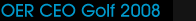
<style>
.page{position:relative;width:196px;height:21px;background:#000000}
.page>*{position:absolute;margin:0}
.t1{font:18px "AvantGardeITCbyBT-Medium";color:#0099cc}
</style>
<div class="page">
<p class="t1" style="left:1px;top:3px;width:159px;height:14px">OER CEO Golf 2008</p>
</div>
